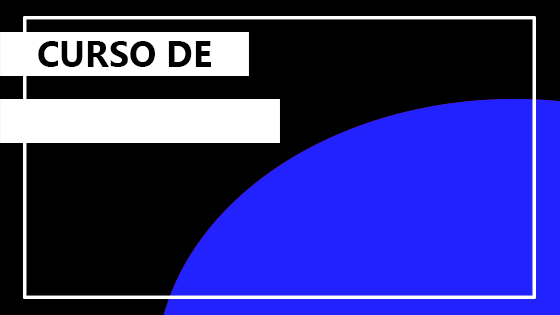
<style>
.page{position:relative;width:560px;height:315px;background:#000000}
.page>*{position:absolute;margin:0}
.t1{font:36px "SegoeUI-Bold";color:#000000}
</style>
<div class="page">
<p class="t1" style="left:38px;top:41px;width:173px;height:26px">CURSO DE</p>
</div>
